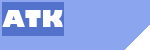
<style>
.page{position:relative;width:150px;height:50px;background:#8ba5ef}
.page>*{position:absolute;margin:0}
.t1{font:23px "GillSans-UltraBold";color:#ffffff}
</style>
<div class="page">
<p class="t1" style="left:2px;top:10px;width:61px;height:17px">ATK</p>
</div>
